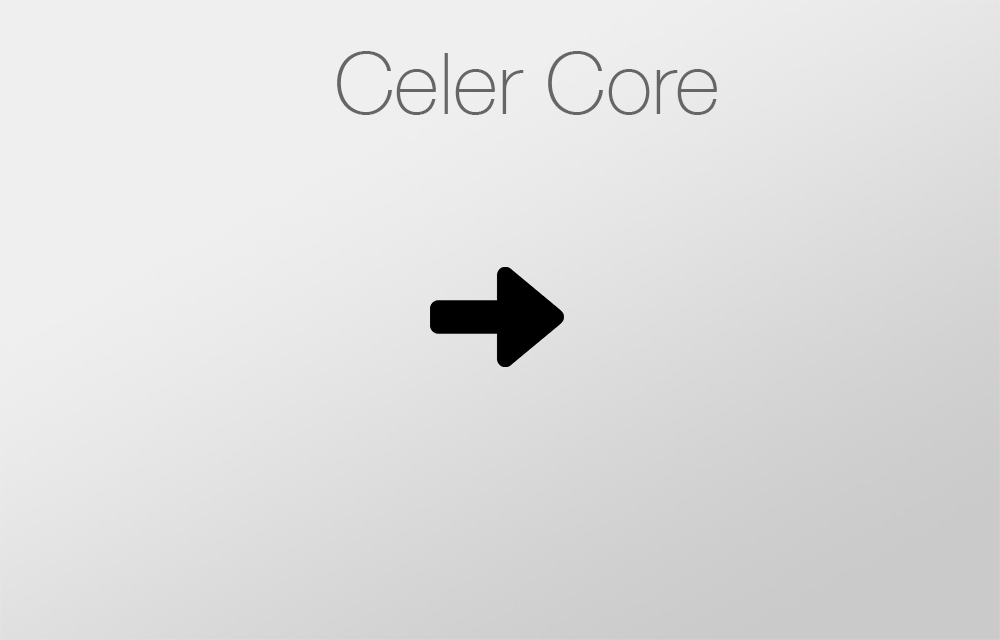
<style>
.page{position:relative;width:1000px;height:640px}
.page>*{position:absolute;margin:0}
.t1{font:85.7px "HelveticaNeue-Thin";color:#666666}
</style>
<div class="page">
<p class="t1" style="left:337px;top:51px;width:380px;height:64px">Celer Core</p>
</div>
